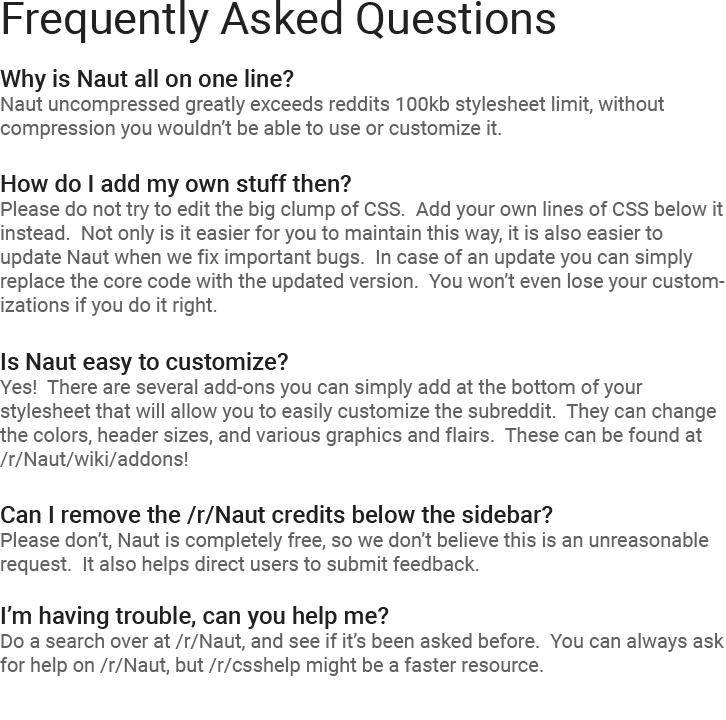
<style>
.page{position:relative;width:726px;height:720px;background:#ffffff}
.page>*{position:absolute;margin:0}
.t1{font:20px "Roboto-Regular";color:#616161}
.t2{font:45px "Roboto-Regular";color:#212121}
.t3{font:24px "Roboto-Medium";color:#212121}
</style>
<div class="page">
<p class="t1" style="left:0px;top:0px;width:725px;height:676px"><span class="t2">Frequently Asked Questions<br><br></span><span class="t3">Why is Naut all on one line?<br></span>Naut uncompressed greatly exceeds reddits 100kb stylesheet limit, without <br>compression you wouldn’t be able to use or customize it.<br><span class="t3"><br>How do I add my own stuff then?<br></span>Please do not try to edit the big clump of CSS.  Add your own lines of CSS below it instead.  Not only is it easier for you to maintain this way, it is also easier to update Naut when we fix important bugs.  In case of an update you can simply replace the core code with the updated version.  You won’t even lose your customizations if you do it right.<br><span class="t3"><br>Is Naut easy to customize?<br></span>Yes!  There are several add-ons you can simply add at the bottom of your stylesheet that will allow you to easily customize the subreddit.  They can change the colors, header sizes, and various graphics and flairs.  These can be found at /r/Naut/wiki/addons!<br><span class="t3"><br>Can I remove the /r/Naut credits below the sidebar?<br></span>Please don’t, Naut is completely free, so we don’t believe this is an unreasonable request.  It also helps direct users to submit feedback.<br><br><span class="t3">I’m having trouble, can you help me?<br></span>Do a search over at /r/Naut, and see if it’s been asked before.  You can always ask for help on /r/Naut, but /r/csshelp might be a faster resource.</p>
</div>
